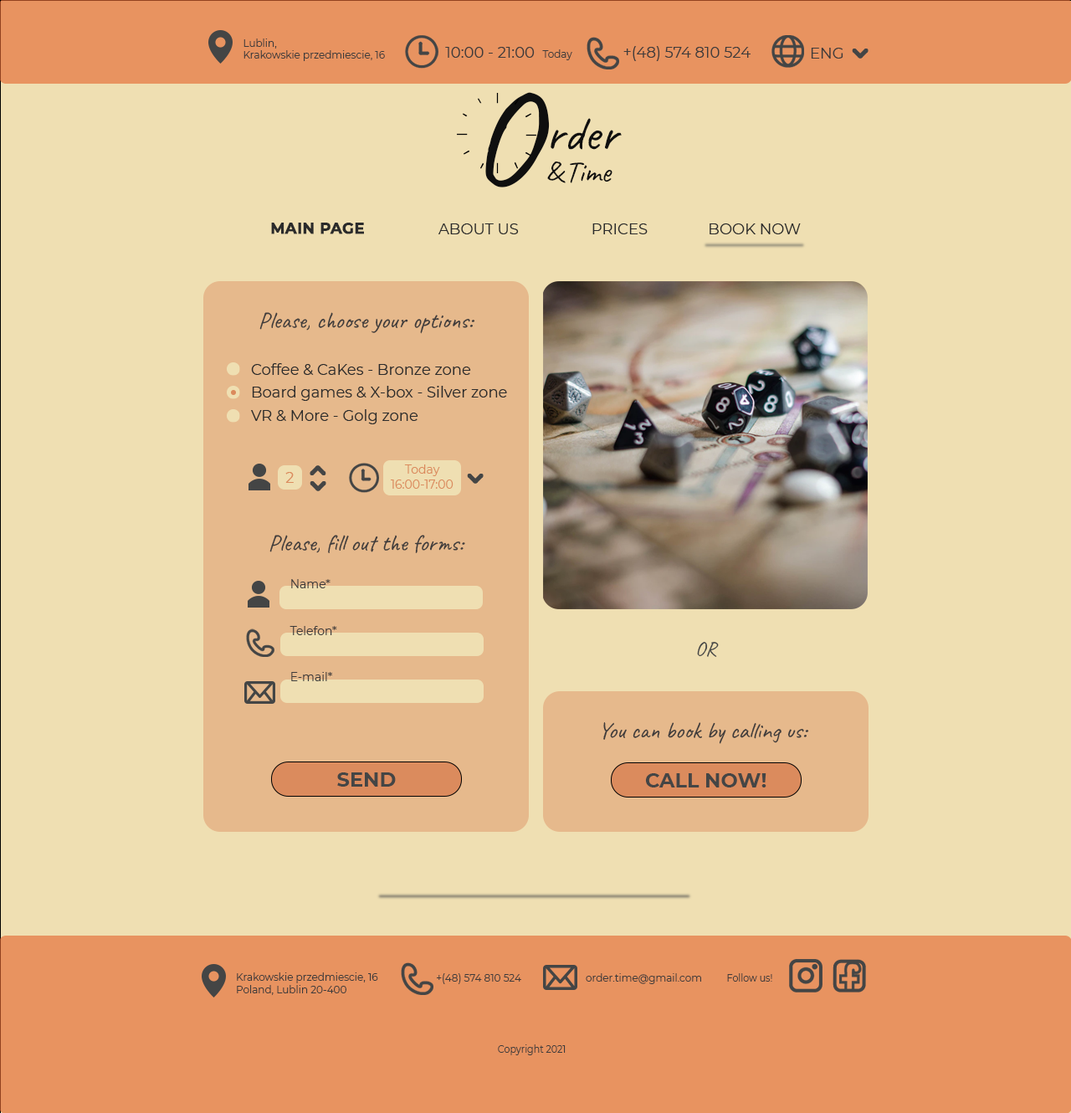
<style>
.page{position:relative;width:1071px;height:1113px;background:#efdfb2}
.page>*{position:absolute;margin:0}
.t1{font:10px "Montserrat-Regular";color:#3e3b3b}
.t2{font:15.1px "Montserrat-Regular";color:#3e3b3b}
.t3{font:133.9px "Caveat-Regular";color:#0f0f0f}
.t4{font:50.2px "Caveat-Regular";color:#0f0f0f}
.t5{font:30.1px "Caveat-Regular";color:#0f0f0f}
.t6{font:15.1px "Montserrat-Bold";color:#2b2b2b;font-weight:bold}
.t7{font:15.1px "Montserrat-Regular";color:#2b2b2b}
.t8{font:23.4px "Caveat-Regular";color:#3e3b3b}
.t9{font:15.1px "Montserrat-Regular";color:#db8b5d}
.t10{font:11.7px "Montserrat-Regular";color:#db8b5d}
.t11{font:11.7px "Montserrat-Regular";color:#3e3b3b}
.t12{font:20.1px "Caveat-Regular";color:#444545}
.t13{font:20.1px "Montserrat-Bold";color:#444545}
.t14{font:10px "Montserrat-Regular";color:#3e3b3b;scale:0.92 1}
</style>
<div class="page">
<p class="t1" style="left:244px;top:38px;width:141px;height:23px;text-align:justify">Lublin,<br>Krakowskie przedmiescie, 16</p>
<p class="t2" style="left:445px;top:47px;width:127px;height:13px">10:00 - 21:00  <span class="t1">Today</span></p>
<p class="t2" style="left:624px;top:46px;width:127px;height:15px">+(48) 574 810 524</p>
<p class="t2" style="left:811px;top:48px;width:33px;height:11px">ENG</p>
<p class="t3" style="left:485px;top:92px;width:65px;height:95px">O</p>
<p class="t4" style="left:551px;top:118px;width:71px;height:32px">rder</p>
<p class="t5" style="left:547px;top:162px;width:19px;height:21px">&amp;</p>
<p class="t5" style="left:570px;top:162px;width:43px;height:21px">Time</p>
<p class="t6" style="left:271px;top:223px;width:93px;height:11px">MAIN PAGE</p>
<p class="t7" style="left:438px;top:223px;width:81px;height:11px">ABOUT US</p>
<p class="t7" style="left:593px;top:223px;width:55px;height:11px">PRICES</p>
<p class="t7" style="left:710px;top:223px;width:91px;height:11px">BOOK NOW</p>
<p class="t8" style="left:259px;top:312px;width:216px;height:22px">Please, choose your options:</p>
<p class="t7" style="left:251px;top:363px;width:220px;height:12px">Coffee &amp; CaKes - Bronze zone</p>
<p class="t7" style="left:252px;top:386px;width:255px;height:15px">Board games &amp; X-box - Silver zone</p>
<p class="t7" style="left:251px;top:409px;width:167px;height:15px">VR &amp; More - Golg zone</p>
<p class="t9" style="left:285px;top:472px;width:9px;height:11px">2</p>
<p class="t10" style="left:404px;top:464px;width:36px;height:12px">Today</p>
<p class="t10" style="left:391px;top:480px;width:63px;height:9px">16:00-17:00</p>
<p class="t8" style="left:269px;top:535px;width:196px;height:18px">Please, fill out the forms:</p>
<p class="t11" style="left:291px;top:579px;width:40px;height:9px">Name*</p>
<p class="t11" style="left:290px;top:626px;width:47px;height:9px">Telefon*</p>
<p class="t12" style="left:697px;top:642px;width:22px;height:15px">OR</p>
<p class="t11" style="left:291px;top:672px;width:41px;height:9px">E-mail*</p>
<p class="t8" style="left:603px;top:722px;width:206px;height:22px">You can book by calling us:</p>
<p class="t13" style="left:337px;top:772px;width:59px;height:15px">SEND</p>
<p class="t13" style="left:645px;top:773px;width:122px;height:15px">CALL NOW!</p>
<p class="t1" style="left:237px;top:973px;width:141px;height:22px;text-align:justify">Krakowskie przedmiescie, 16<br>Poland, Lublin 20-400</p>
<p class="t1" style="left:437px;top:973px;width:84px;height:11px">+(48) 574 810 524</p>
<p class="t1" style="left:586px;top:973px;width:115px;height:11px">order.time@gmail.com</p>
<p class="t14" style="left:727px;top:973px;width:45px;height:9px">Follow us!</p>
<p class="t14" style="left:498px;top:1044px;width:68px;height:11px">Copyright 2021</p>
</div>
